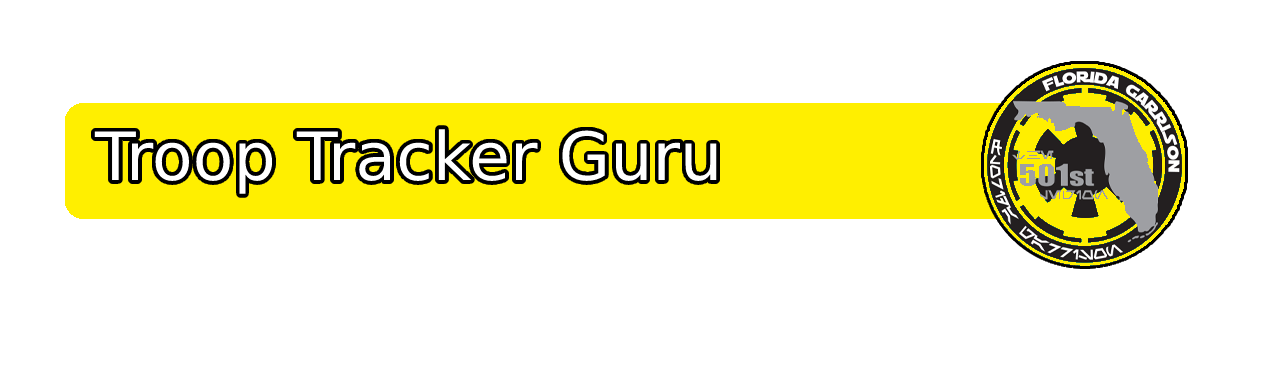
<style>
.page{position:relative;width:1274px;height:368px;background:#ffffff}
.page>*{position:absolute;margin:0}
.t1{font:66.7px "Bahnschrift";color:#ffffff}
</style>
<div class="page">
<p class="t1" style="left:94px;top:129px;width:623px;height:65px">Troop Tracker Guru</p>
</div>
